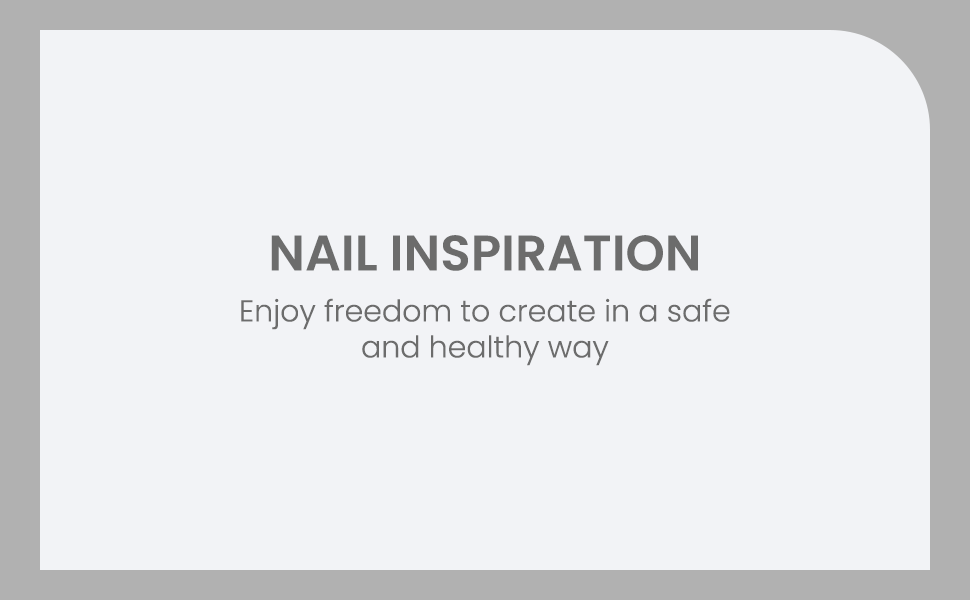
<style>
.page{position:relative;width:970px;height:600px;background:#f2f3f6}
.page>*{position:absolute;margin:0}
.t1{font:50px "Poppins-SemiBold";color:#6c6c6c;text-transform:uppercase}
.t2{font:30px "Poppins-Light";color:#6c6c6c}
</style>
<div class="page">
<p class="t1" style="left:271px;top:235px;width:427px;height:36px">Nail Inspiration</p>
<p class="t2" style="left:241px;top:298px;width:489px;height:68px;text-align:center">Enjoy freedom to create in a safe<br>and healthy way</p>
</div>
